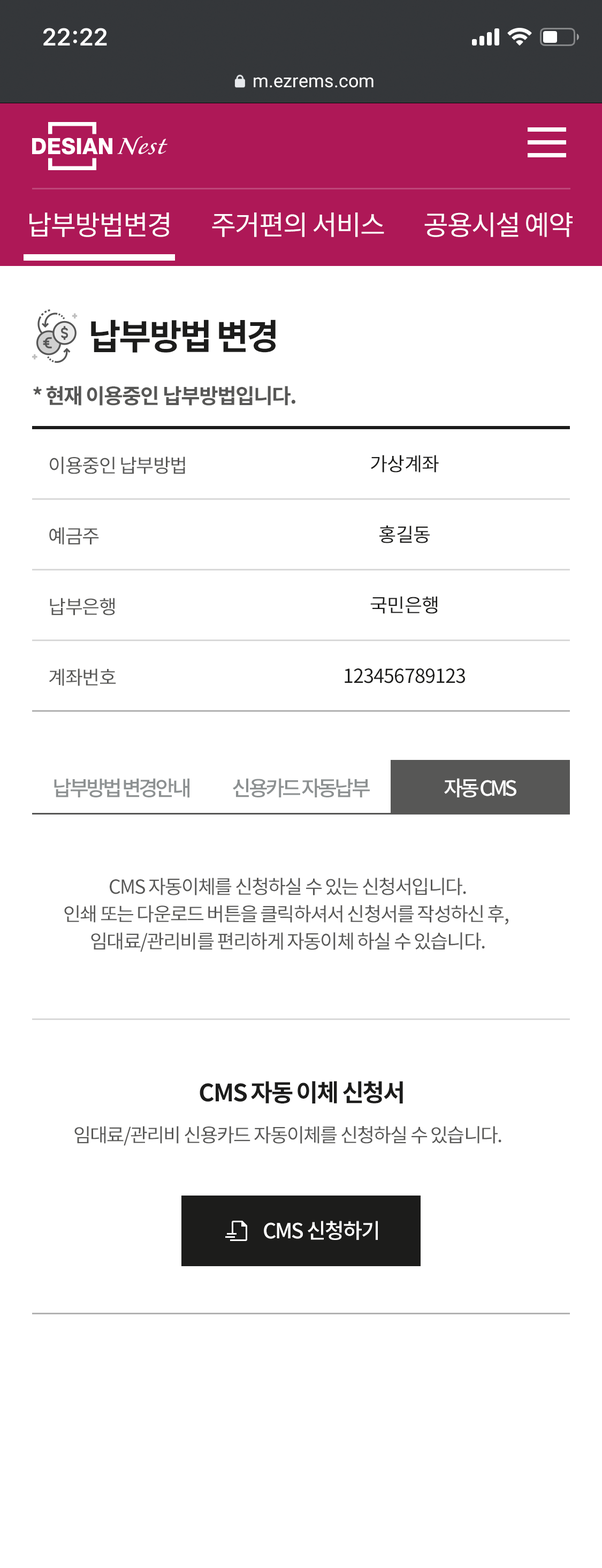
<style>
.page{position:relative;width:602px;height:1568px;background:#ffffff}
.page>*{position:absolute;margin:0}
.t1{font:18.2px "Roboto-Regular";color:#ffffff}
.t2{font:27.3px "NotoSansCJKkr-Regular";letter-spacing:-0.04em;color:#ffffff}
.t3{font:35.3px "NotoSansCJKkr-Bold";letter-spacing:-0.06em;color:#1c1c1b}
.t4{font:20.9px "NotoSansCJKkr-Bold";letter-spacing:-0.05em;color:#575756}
.t5{font:19.3px/70.6px "NotoSansCJKkr-Regular";letter-spacing:-0.04em;color:#575756}
.t6{font:19.3px/70.6px "NotoSansCJKkr-Regular";letter-spacing:-0.025em;color:#1c1c1b}
.t7{font:20.9px "NotoSansCJKkr-Medium";letter-spacing:-0.12em;color:#8c9091}
.t8{font:20.9px "NotoSansCJKkr-Medium";letter-spacing:-0.12em;color:#ffffff}
.t9{font:19.3px/27.3px "NotoSansCJKkr-Regular";letter-spacing:-0.05em;color:#575756}
.t10{font:24.1px "NotoSansCJKkr-Bold";letter-spacing:-0.05em;color:#1c1c1b}
.t11{font:19.3px "NotoSansCJKkr-Regular";letter-spacing:-0.05em;color:#575756}
.t12{font:20.9px "NotoSansCJKkr-Medium";letter-spacing:-0.05em;color:#ffffff}
</style>
<div class="page">
<p class="t1" style="left:254px;top:77px;width:120px;height:11px">m.ezrems.com</p>
<p class="t2" style="left:29px;top:212px;width:140px;height:25px">납부방법변경</p>
<p class="t2" style="left:212px;top:212px;width:172px;height:25px">주거편의 서비스</p>
<p class="t2" style="left:424px;top:212px;width:149px;height:25px">공용시설 예약</p>
<p class="t3" style="left:91px;top:319px;width:185px;height:34px">납부방법 변경</p>
<p class="t4" style="left:33px;top:386px;width:262px;height:20px">* 현재 이용중인 납부방법입니다.</p>
<p class="t5" style="left:49px;top:456px;width:136px;height:230px">이용중인 납부방법<br>예금주<br>납부은행<br>계좌번호</p>
<p class="t6" style="left:345px;top:455px;width:120px;height:228px;text-align:center">가상계좌<br>홍길동<br>국민은행<br>123456789123</p>
<p class="t7" style="left:54px;top:778px;width:135px;height:20px">납부방법 변경안내</p>
<p class="t7" style="left:233px;top:778px;width:137px;height:19px">신용카드 자동납부</p>
<p class="t8" style="left:444px;top:778px;width:72px;height:19px">자동 CMS</p>
<p class="t9" style="left:64px;top:878px;width:444px;height:74px;text-align:center">CMS 자동이체를 신청하실 수 있는 신청서입니다.<br>인쇄 또는 다운로드 버튼을 클릭하셔서 신청서를 작성하신 후, <br>임대료/관리비를 편리하게 자동이체 하실 수 있습니다.</p>
<p class="t10" style="left:200px;top:1081px;width:203px;height:22px">CMS 자동 이체 신청서</p>
<p class="t11" style="left:74px;top:1126px;width:427px;height:20px">임대료/관리비 신용카드 자동이체를 신청하실 수 있습니다.</p>
<p class="t12" style="left:264px;top:1221px;width:114px;height:19px">CMS 신청하기</p>
</div>
